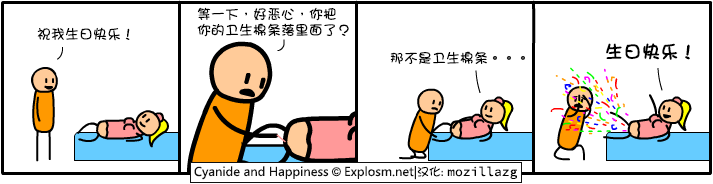
<style>
.page{position:relative;width:713px;height:184px;background:#ffffff}
.page>*{position:absolute;margin:0}
.t1{font:14px/16px "DFGirl";color:#000000}
.t2{font:14px "DFGirl";color:#000000}
.t3{font:18px "DFGirl";color:#000000;font-weight:bold}
</style>
<div class="page">
<p class="t1" style="left:197px;top:7px;width:152px;height:30px">等一下，好恶心，你把<br>你的卫生棉条落里面了？</p>
<p class="t2" style="left:37px;top:27px;width:93px;height:14px">祝我生日快乐！</p>
<p class="t2" style="left:390px;top:51px;width:135px;height:14px">那不是卫生棉条。。。</p>
<p class="t3" style="left:606px;top:43px;width:84px;height:17px">生日快乐！</p>
</div>
